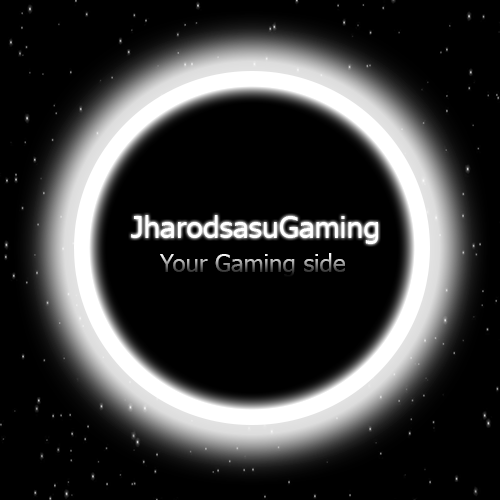
<style>
.page{position:relative;width:500px;height:500px;background:#000000}
.page>*{position:absolute;margin:0}
.t1{font:30px "Tahoma";color:#ffffff}
.t2{font:24px "Tahoma"}
</style>
<div class="page">
<p class="t1" style="left:131px;top:215px;width:247px;height:29px">JharodsasuGaming</p>
<p class="t2" style="left:160px;top:253px;width:185px;height:24px">Your Gaming side</p>
</div>
